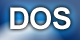
<style>
.page{position:relative;width:80px;height:40px}
.page>*{position:absolute;margin:0}
.t1{font:30px "Arial-BoldMT";letter-spacing:-0.01em;color:#ffffff;text-transform:uppercase}
</style>
<div class="page">
<p class="t1" style="left:10px;top:7px;width:61px;height:23px">DOS</p>
</div>
